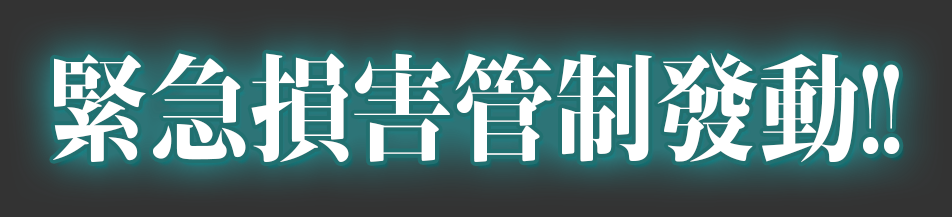
<style>
.page{position:relative;width:952px;height:217px}
.page>*{position:absolute;margin:0}
.t1{font:116.4px "KochoStd-Heavy";color:#fffefe;scale:0.89 1}
</style>
<div class="page">
<p class="t1" style="left:53px;top:53px;width:847px;height:110px">緊急損害管制發動！！</p>
</div>
